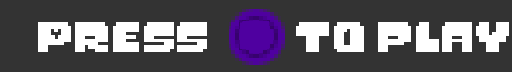
<style>
.page{position:relative;width:512px;height:72px;background:#333333}
.page>*{position:absolute;margin:0}
.t1{font:33.5px "MonsterFriendFore";color:#ffffff}
</style>
<div class="page">
<p class="t1" style="left:38px;top:22px;width:471px;height:30px">Press        to play</p>
</div>
